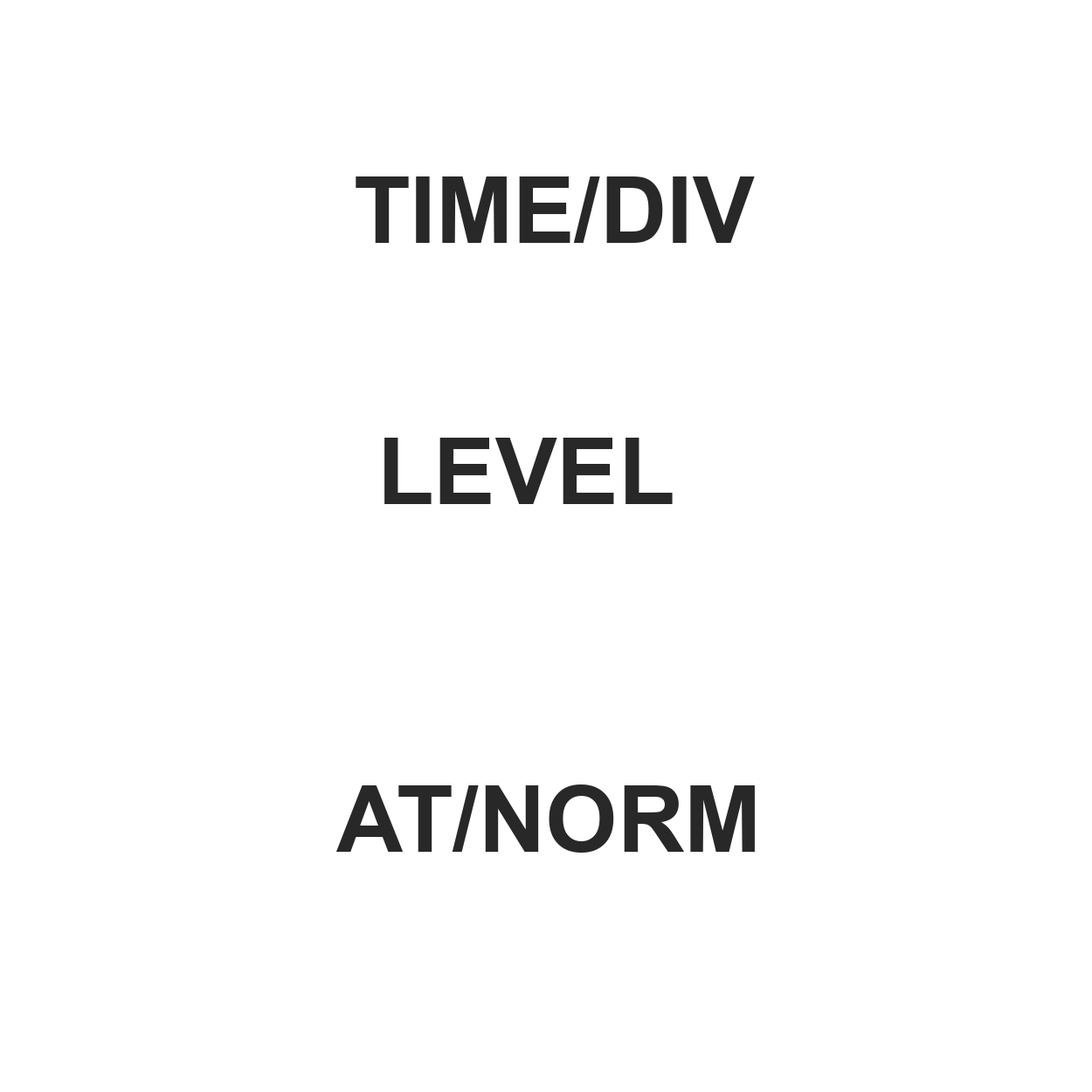
<style>
.page{position:relative;width:1092px;height:1092px;background:#ffffff}
.page>*{position:absolute;margin:0}
.t1{font:92.5px "Arial-BoldMT";color:#282828}
</style>
<div class="page">
<p class="t1" style="left:356px;top:176px;width:399px;height:67px">TIME/DIV</p>
<p class="t1" style="left:384px;top:438px;width:289px;height:66px">LEVEL</p>
<p class="t1" style="left:336px;top:784px;width:419px;height:69px">AT/NORM</p>
</div>
